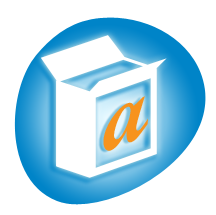
<style>
.page{position:relative;width:216px;height:215px;background:#ffffff}
.page>*{position:absolute;margin:0}
.t1{font:98.5px "WrexhamScript";color:#f7931d;scale:0.92 1}
</style>
<div class="page">
<p class="t1" style="left:103px;top:96px;width:45px;height:55px;rotate:-22deg">a</p>
</div>
